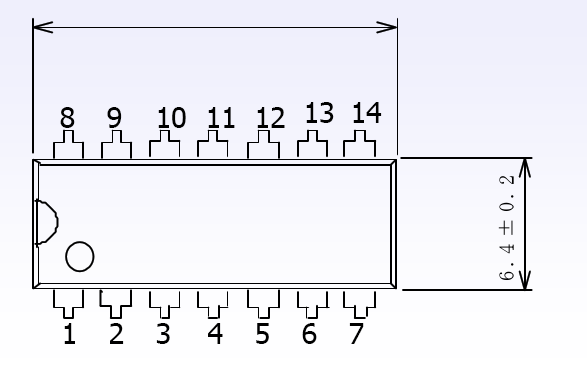
<style>
.page{position:relative;width:587px;height:375px}
.page>*{position:absolute;margin:0}
.t1{font:29px "Tahoma";color:#000000}
</style>
<div class="page">
<p class="t1" style="left:306px;top:102px;width:28px;height:21px">13</p>
<p class="t1" style="left:353px;top:102px;width:29px;height:21px">14</p>
<p class="t1" style="left:60px;top:107px;width:15px;height:21px">8</p>
<p class="t1" style="left:107px;top:107px;width:15px;height:21px">9</p>
<p class="t1" style="left:158px;top:107px;width:28px;height:21px">10</p>
<p class="t1" style="left:208px;top:107px;width:27px;height:21px">11</p>
<p class="t1" style="left:257px;top:107px;width:28px;height:21px">12</p>
<p class="t1" style="left:64px;top:323px;width:11px;height:21px">1</p>
<p class="t1" style="left:110px;top:323px;width:14px;height:21px">2</p>
<p class="t1" style="left:156px;top:323px;width:14px;height:21px">3</p>
<p class="t1" style="left:208px;top:323px;width:15px;height:21px">4</p>
<p class="t1" style="left:256px;top:323px;width:13px;height:21px">5</p>
<p class="t1" style="left:302px;top:323px;width:15px;height:21px">6</p>
<p class="t1" style="left:349px;top:323px;width:15px;height:21px">7</p>
</div>
